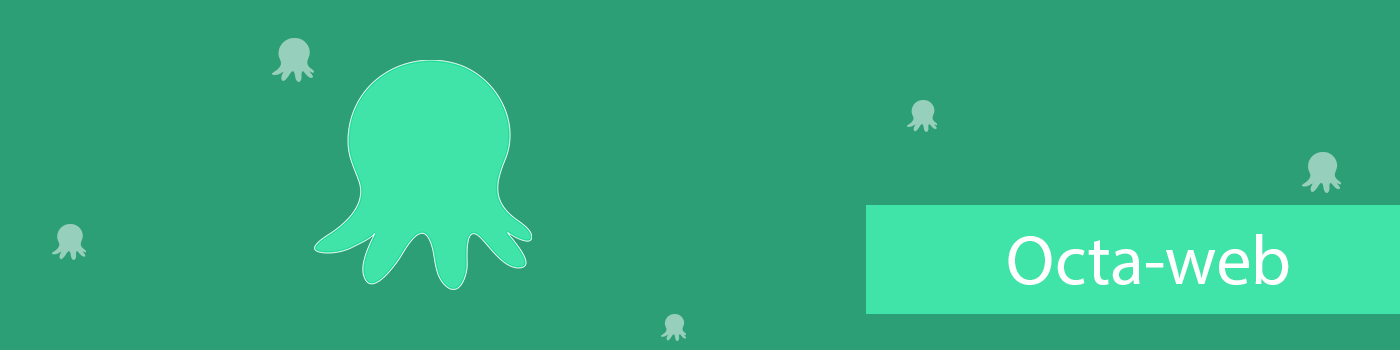
<style>
.page{position:relative;width:1400px;height:350px;background:#2d9f76}
.page>*{position:absolute;margin:0}
.t1{font:70px "MyriadPro-Regular";color:#ffffff}
</style>
<div class="page">
<p class="t1" style="left:1008px;top:234px;width:281px;height:51px">Octa-web</p>
</div>
